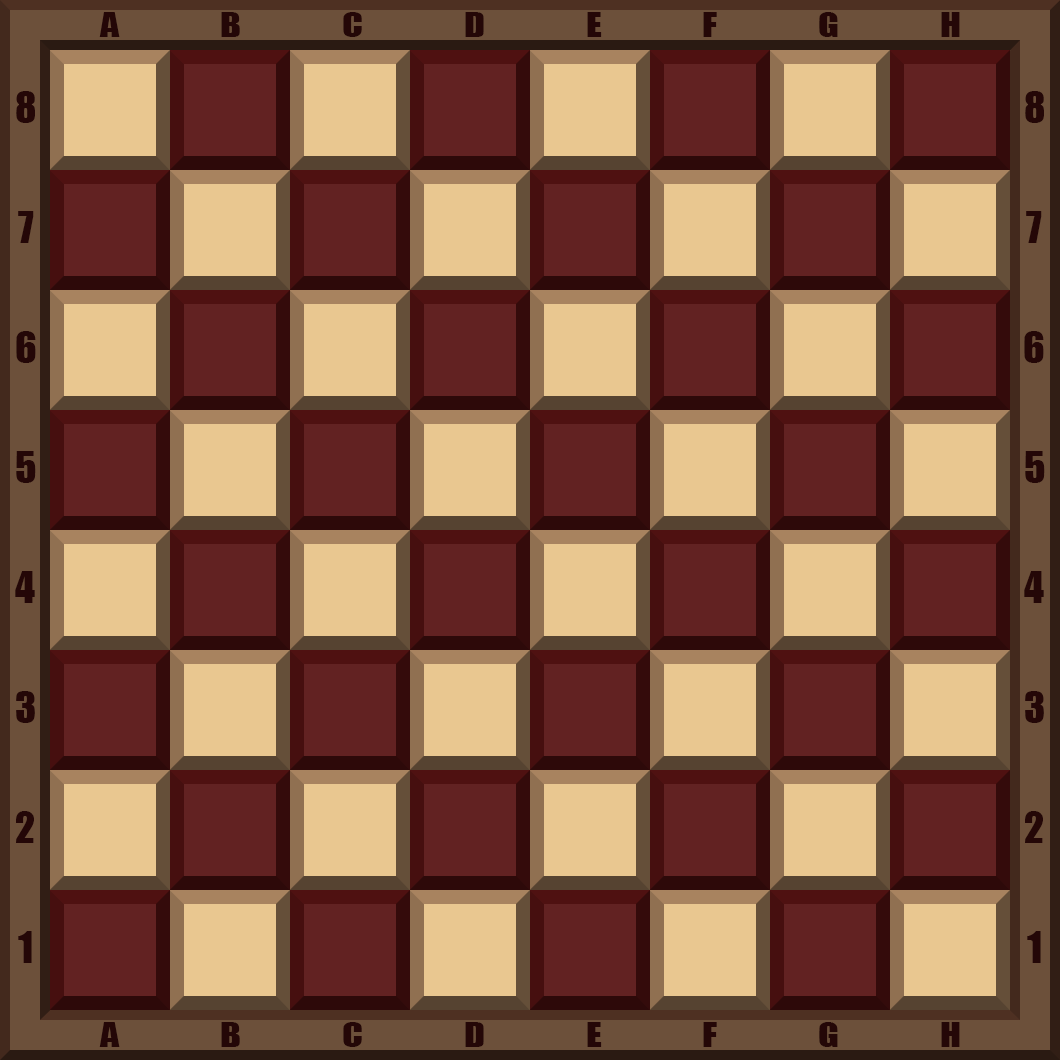
<style>
.page{position:relative;width:1060px;height:1060px;background:#e9c790}
.page>*{position:absolute;margin:0}
.t1{font:30.8px "Impact";letter-spacing:2.62em;color:#240707;scale:1.25 1}
.t2{font:41.2px/120px "Impact";color:#240707}
</style>
<div class="page">
<p class="t1" style="left:99px;top:12px;width:861px;height:25px">ABCDEFGH</p>
<p class="t2" style="left:15px;top:91px;width:21px;height:872px;text-align:center">8<br>7<br>6<br>5<br>4<br>3<br>2<br>1</p>
<p class="t2" style="left:1024px;top:91px;width:21px;height:872px;text-align:center">8<br>7<br>6<br>5<br>4<br>3<br>2<br>1</p>
<p class="t1" style="left:99px;top:1022px;width:861px;height:25px">ABCDEFGH</p>
</div>
